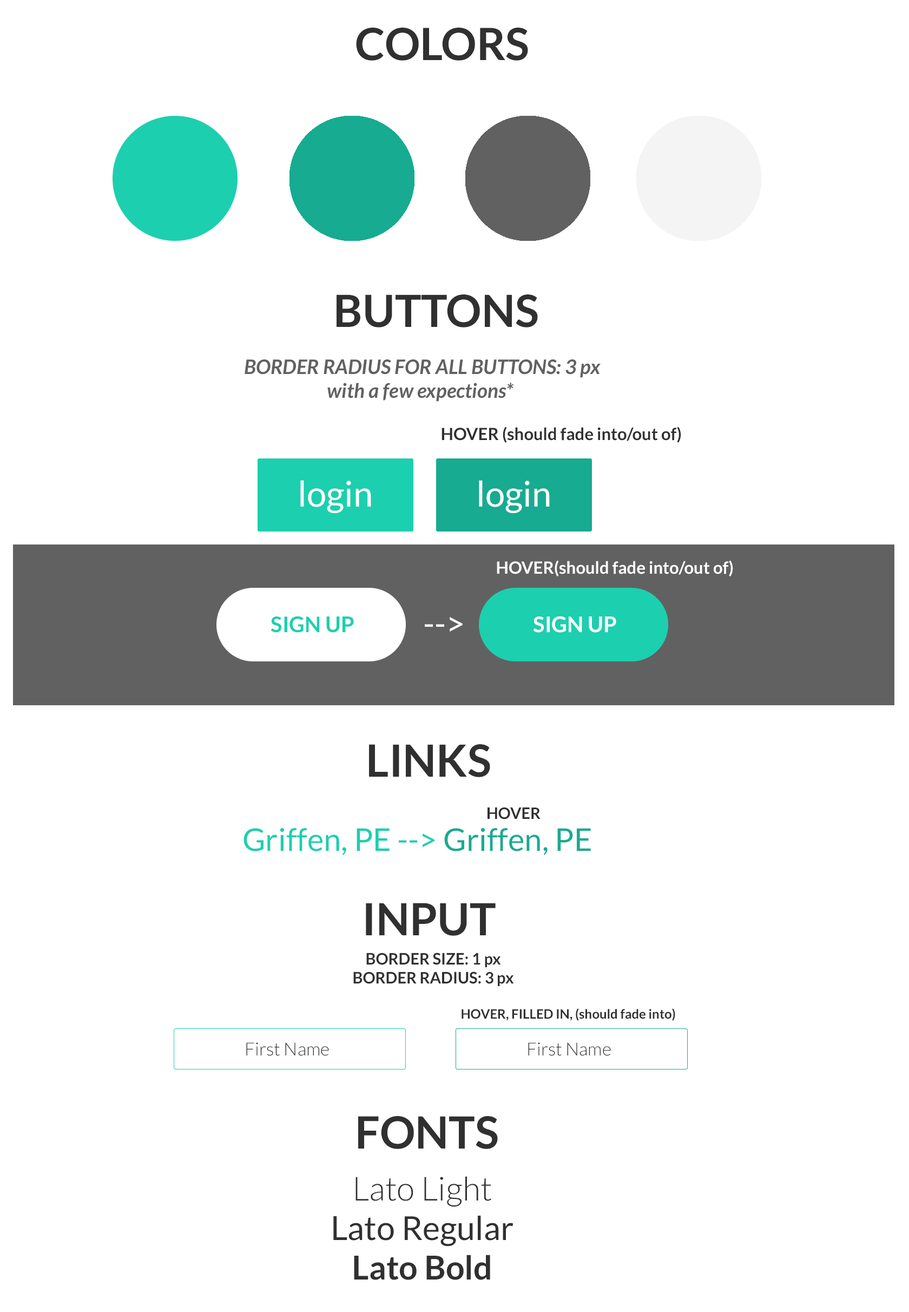
<style>
.page{position:relative;width:909px;height:1312px;background:#ffffff}
.page>*{position:absolute;margin:0}
.t1{font:44.4px "Lato-Bold";color:#303030}
.t2{font:20px "Lato-BoldItalic";color:#616161}
.t3{font:16.8px "Lato-Bold";color:#303030}
.t4{font:35.3px "Lato-Regular";color:#ffffff}
.t5{font:16.8px "Lato-Bold";color:#ffffff}
.t6{font:21.5px "Lato-Bold";color:#1ccfaf}
.t7{font:33px "Lato-Regular";color:#ffffff}
.t8{font:21.5px "Lato-Bold";color:#ffffff}
.t9{font:15.7px "Lato-Bold";color:#303030}
.t10{font:31.4px "Lato-Regular";color:#1ccfaf}
.t11{font:31.4px "Lato-Regular";color:#17ab91}
.t12{font:13px "Lato-Bold";color:#303030}
.t13{font:18px "Lato-Light";color:#303030}
.t14{font:33px "Lato-Regular";color:#303030}
.t15{font:33px "Lato-Light";color:#303030}
.t16{font:33px "Lato-Bold";color:#303030}
</style>
<div class="page">
<p class="t1" style="left:356px;top:28px;width:172px;height:33px">COLORS</p>
<p class="t1" style="left:337px;top:294px;width:201px;height:33px">BUTTONS</p>
<p class="t2" style="left:245px;top:359px;width:356px;height:43px;text-align:center">BORDER RADIUS FOR ALL BUTTONS: 3 px<br>with a few expections*</p>
<p class="t3" style="left:442px;top:426px;width:239px;height:17px">HOVER (should fade into/out of)</p>
<p class="t4" style="left:300px;top:480px;width:71px;height:33px">login</p>
<p class="t4" style="left:479px;top:480px;width:71px;height:33px">login</p>
<p class="t5" style="left:497px;top:560px;width:236px;height:16px">HOVER(should fade into/out of)</p>
<p class="t6" style="left:271px;top:616px;width:83px;height:17px">SIGN UP</p>
<p class="t7" style="left:425px;top:617px;width:38px;height:14px">--&gt;</p>
<p class="t8" style="left:533px;top:616px;width:83px;height:17px">SIGN UP</p>
<p class="t1" style="left:369px;top:744px;width:121px;height:33px">LINKS</p>
<p class="t9" style="left:488px;top:807px;width:53px;height:12px">HOVER</p>
<p class="t10" style="left:244px;top:827px;width:347px;height:28px">Griffen, PE --&gt; <span class="t11">Griffen, PE</span></p>
<p class="t1" style="left:366px;top:903px;width:130px;height:33px">INPUT</p>
<p class="t9" style="left:353px;top:952px;width:161px;height:34px;text-align:center">BORDER SIZE: 1 px<br>BORDER RADIUS: 3 px</p>
<p class="t12" style="left:462px;top:1008px;width:213px;height:13px">HOVER, FILLED IN, (should fade into)</p>
<p class="t13" style="left:246px;top:1042px;width:83px;height:14px">First Name</p>
<p class="t13" style="left:528px;top:1042px;width:83px;height:14px">First Name</p>
<p class="t1" style="left:358px;top:1116px;width:140px;height:33px">FONTS</p>
<p class="t14" style="left:333px;top:1176px;width:181px;height:104px;text-align:center"><span class="t15">Lato Light<br></span>Lato Regular<br><span class="t16">Lato Bold</span></p>
</div>
